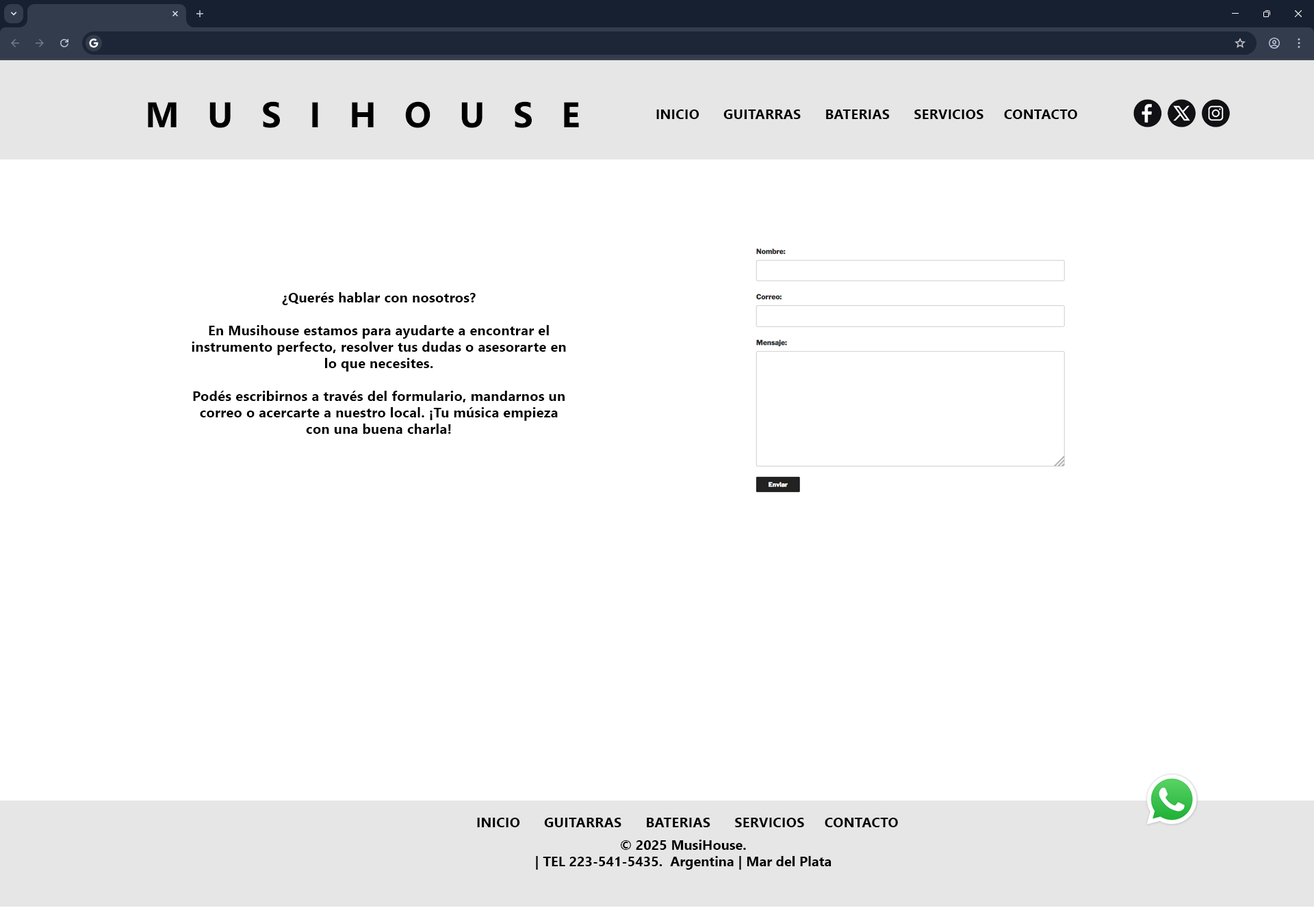
<style>
.page{position:relative;width:1314px;height:908px;background:#ffffff}
.page>*{position:absolute;margin:0}
.t1{font:35.5px "SegoeUI-Bold";letter-spacing:0.8em;color:#000000}
.t2{font:13.7px "SegoeUI-Bold";letter-spacing:0.015em;color:#000000}
.t3{font:13.7px "SegoeUI-Bold";color:#000000}
</style>
<div class="page">
<p class="t1" style="left:148px;top:101px;width:431px;height:27px">MUSIHOUSE</p>
<p class="t2" style="left:656px;top:109px;width:421px;height:10px">INICIO      GUITARRAS      BATERIAS      SERVICIOS     CONTACTO</p>
<p class="t2" style="left:192px;top:292px;width:374px;height:142px;text-align:center">¿Querés hablar con nosotros?<br><br>En Musihouse estamos para ayudarte a encontrar el instrumento perfecto, resolver tus dudas o asesorarte en lo que necesites.<br><br>Podés escribirnos a través del formulario, mandarnos un correo o acercarte a nuestro local. ¡Tu música empieza con una buena charla!</p>
<p class="t2" style="left:477px;top:818px;width:421px;height:9px">INICIO      GUITARRAS      BATERIAS      SERVICIOS     CONTACTO</p>
<p class="t3" style="left:536px;top:839px;width:295px;height:31px;text-align:center">© 2025 MusiHouse.<br>| TEL 223-541-5435.  Argentina | Mar del Plata</p>
</div>
